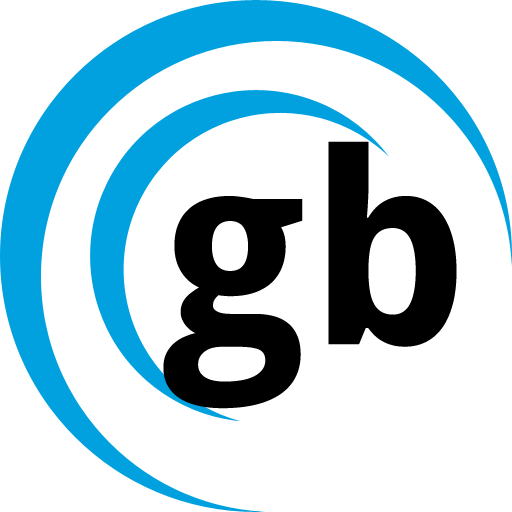
<style>
.page{position:relative;width:512px;height:512px;background:#ffffff}
.page>*{position:absolute;margin:0}
.t1{font:266.2px "DroidSans-Bold";color:#000000}
</style>
<div class="page">
<p class="t1" style="left:163px;top:141px;width:294px;height:268px">gb</p>
</div>
